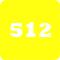
<style>
.page{position:relative;width:60px;height:60px;background:#ffff0f}
.page>*{position:absolute;margin:0}
.t1{font:20.8px "Rockwell-ExtraBold";color:#fffffe}
</style>
<div class="page">
<p class="t1" style="left:10px;top:22px;width:41px;height:15px">512</p>
</div>
